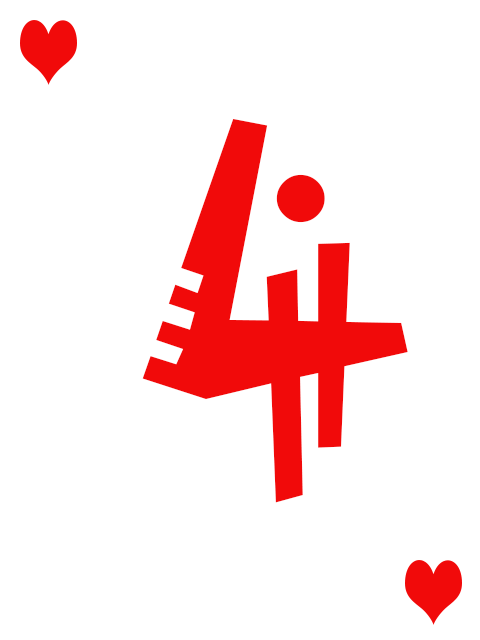
<style>
.page{position:relative;width:480px;height:640px;background:#ffffff}
.page>*{position:absolute;margin:0}
.t1{font:386.3px "Jokerman-Regular";color:#f10a0a}
</style>
<div class="page">
<p class="t1" style="left:142px;top:119px;width:266px;height:384px">4</p>
</div>
